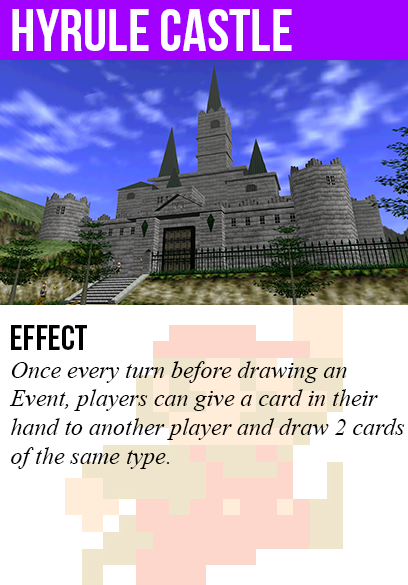
<style>
.page{position:relative;width:408px;height:585px;background:#ffffff}
.page>*{position:absolute;margin:0}
.t1{font:60px "BebasNeue";color:#ffffff}
.t2{font:36px "BebasNeue";color:#000000}
.t3{font:24px "TimesNewRomanPS-ItalicMT";color:#000000}
</style>
<div class="page">
<p class="t1" style="left:12px;top:9px;width:280px;height:42px">hyrule castle</p>
<p class="t2" style="left:11px;top:325px;width:76px;height:25px">Effect</p>
<p class="t3" style="left:9px;top:361px;width:396px;height:108px">Once every turn before drawing an<br>Event, players can give a card in their<br>hand to another player and draw 2 cards<br>of the same type.</p>
</div>
